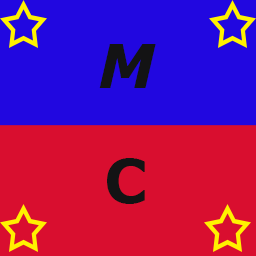
<style>
.page{position:relative;width:256px;height:256px;background:#d90e2f}
.page>*{position:absolute;margin:0}
.t1{font:60px "Verdana-BoldItalic";color:#131314}
.t2{font:60px "Verdana-Bold";color:#131314}
</style>
<div class="page">
<p class="t1" style="left:99px;top:44px;width:57px;height:44px">M</p>
<p class="t2" style="left:107px;top:158px;width:38px;height:46px">C</p>
</div>
